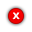
<style>
.page{position:relative;width:32px;height:32px;background:#ffffff}
.page>*{position:absolute;margin:0}
.t1{font:12px "Roboto-Medium";color:#ffffff;scale:1.19 1}
</style>
<div class="page">
<p class="t1" style="left:12px;top:12px;width:8px;height:8px">x</p>
</div>
